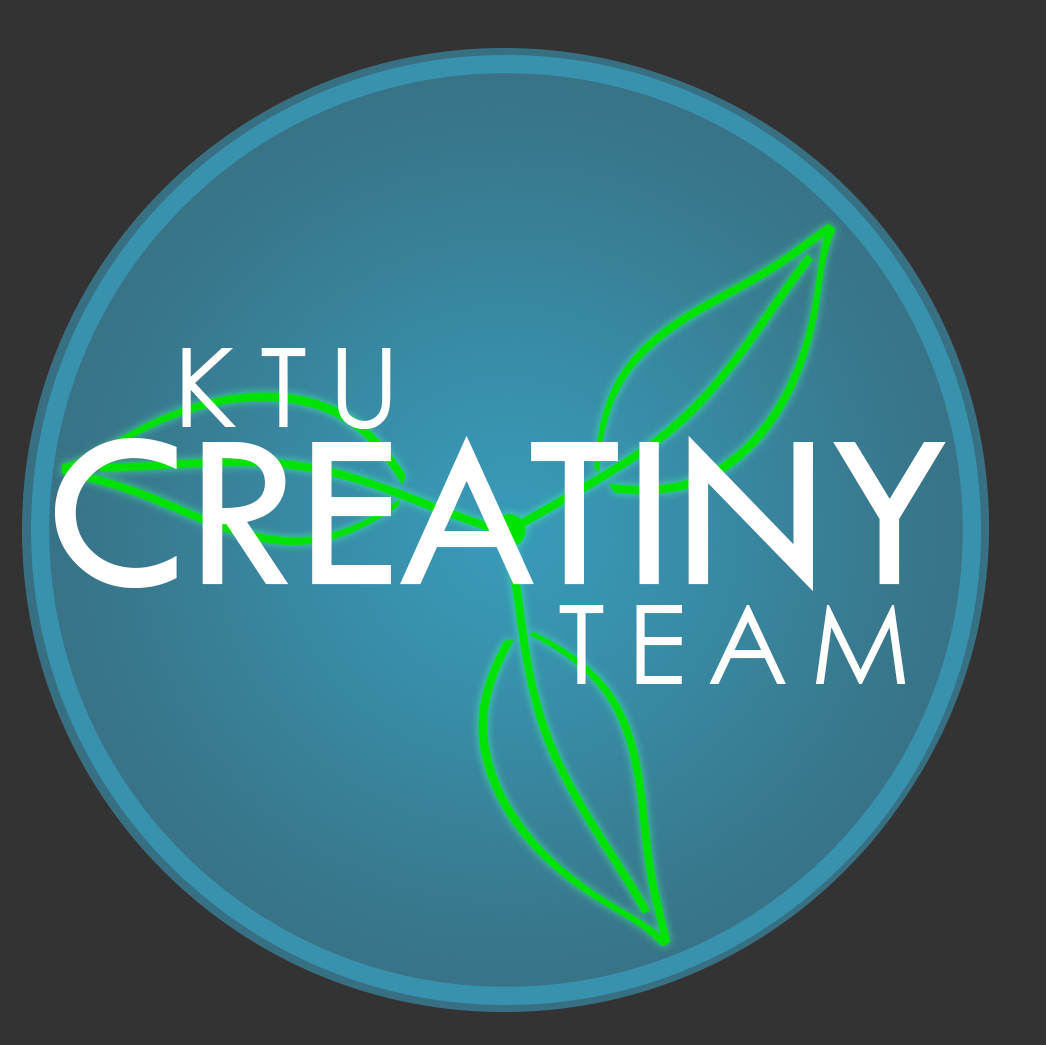
<style>
.page{position:relative;width:1046px;height:1045px;background:#333333}
.page>*{position:absolute;margin:0}
.t1{font:109.7px "CenturyGothic";letter-spacing:0.2em;color:#ffffff}
.t2{font:228.7px "TwCenMT-Regular";color:#ffffff}
</style>
<div class="page">
<p class="t1" style="left:182px;top:348px;width:209px;height:81px">KTU</p>
<p class="t2" style="left:55px;top:436px;width:891px;height:155px">CREATINY</p>
<p class="t1" style="left:559px;top:605px;width:347px;height:79px">TEAM</p>
</div>
